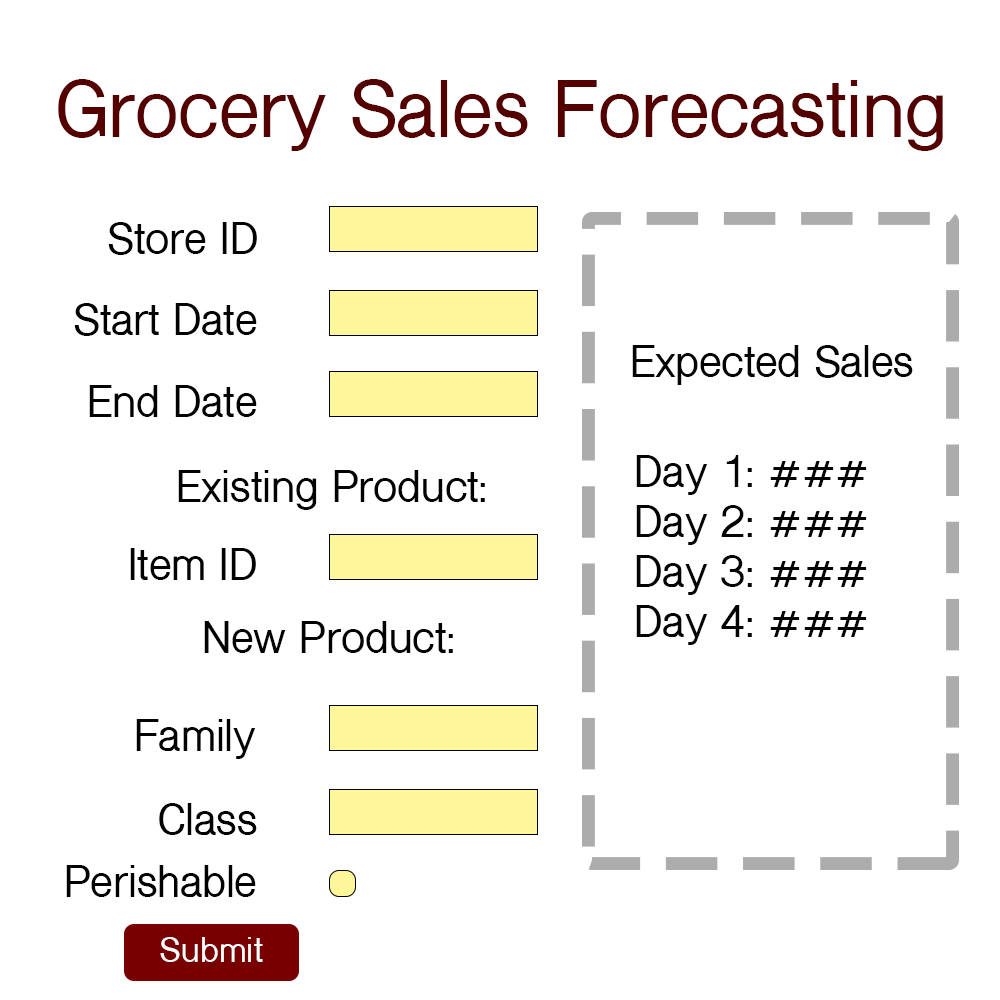
<style>
.page{position:relative;width:1000px;height:1000px;background:#ffffff}
.page>*{position:absolute;margin:0}
.t1{font:75px "ShreeDev0714-Bold";color:#550000}
.t2{font:41.7px "ShreeDev0714-Bold";color:#020202}
.t3{font:41.7px "ShreeDev0714-Bold";color:#040404}
.t4{font:33.3px "ShreeDev0714-Bold";color:#fcfefe}
</style>
<div class="page">
<p class="t1" style="left:58px;top:79px;width:885px;height:72px">Grocery Sales Forecasting</p>
<p class="t2" style="left:108px;top:222px;width:149px;height:33px">Store ID</p>
<p class="t2" style="left:74px;top:303px;width:183px;height:33px">Start Date</p>
<p class="t3" style="left:632px;top:345px;width:281px;height:40px">Expected Sales</p>
<p class="t2" style="left:89px;top:385px;width:168px;height:32px">End Date</p>
<p class="t3" style="left:636px;top:455px;width:231px;height:190px">Day 1: ###<br>Day 2: ###<br>Day 3: ###<br>Day 4: ###</p>
<p class="t2" style="left:178px;top:470px;width:307px;height:40px">Existing Product:</p>
<p class="t2" style="left:130px;top:548px;width:126px;height:32px">Item ID</p>
<p class="t2" style="left:204px;top:621px;width:249px;height:32px">New Product:</p>
<p class="t2" style="left:136px;top:719px;width:120px;height:40px">Family</p>
<p class="t2" style="left:159px;top:803px;width:98px;height:32px">Class</p>
<p class="t2" style="left:66px;top:865px;width:190px;height:32px">Perishable</p>
<p class="t4" style="left:160px;top:937px;width:103px;height:25px">Submit</p>
</div>
